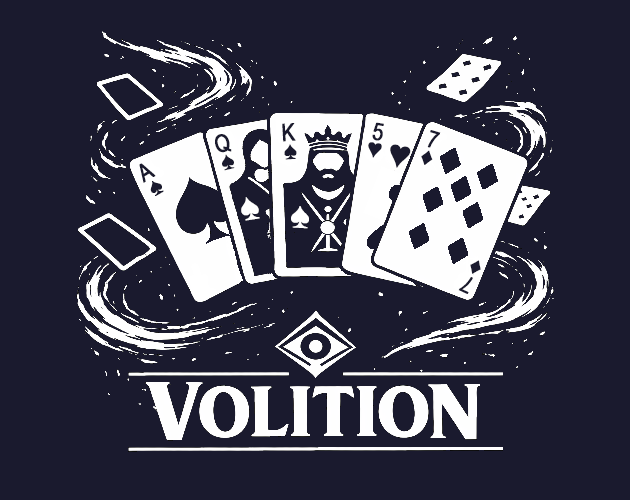
<style>
.page{position:relative;width:630px;height:500px;background:#1a1a2e}
.page>*{position:absolute;margin:0}
.t1{font:24px/18px "ArialNarrow";color:#1a1a2e;font-weight:bold}
.t2{font:24px/24px "ArialNarrow";color:#1a1a2e;font-weight:bold}
.t3{font:36px "ArialNarrow";color:#1a1a2e;font-weight:bold}
.t4{font:37.5px "ArialNarrow";color:#ffffff;font-weight:bold;scale:0.93 1}
.t5{font:36px "ArialNarrow";color:#ffffff;font-weight:bold}
</style>
<div class="page">
<p class="t1" style="left:282px;top:123px;width:15px;height:37px;text-align:center;rotate:-4deg"><span class="t2"> </span>K<br> ♠</p>
<p class="t1" style="left:368px;top:122px;width:16px;height:36px;text-align:center;rotate:9deg">5<br> ♥</p>
<p class="t1" style="left:215px;top:134px;width:20px;height:37px;text-align:center;rotate:-14deg"><span class="t2"> </span>Q<br> ♠</p>
<p class="t1" style="left:421px;top:130px;width:20px;height:35px;text-align:center;rotate:17deg">7<br>♦</p>
<p class="t3" style="left:390px;top:144px;width:21px;height:24px;rotate:11deg">♥</p>
<p class="t1" style="left:139px;top:163px;width:25px;height:33px;text-align:center;rotate:-30deg">A<br> ♠</p>
<p class="t4" style="left:241px;top:197px;width:19px;height:24px;rotate:-9deg">♠</p>
<p class="t5" style="left:291px;top:206px;width:18px;height:23px;rotate:3deg">♠</p>
<p class="t1" style="left:458px;top:260px;width:23px;height:34px;text-align:center;rotate:-155deg">7<br>♦</p>
</div>
